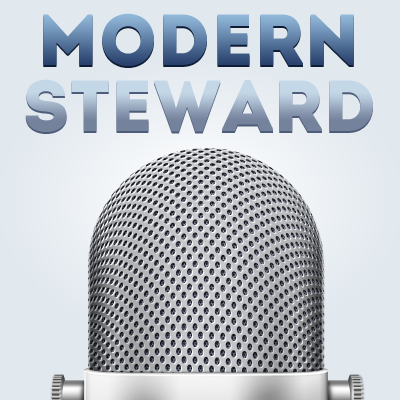
<style>
.page{position:relative;width:400px;height:400px;background:#e1e8ee}
.page>*{position:absolute;margin:0}
.t1{font:72px "Intro"}
</style>
<div class="page">
<p class="t1" style="left:43px;top:15px;width:311px;height:53px">Modern</p>
<p class="t1" style="left:43px;top:13px;width:311px;height:53px">Modern</p>
<p class="t1" style="left:25px;top:81px;width:348px;height:53px">Steward</p>
<p class="t1" style="left:25px;top:79px;width:348px;height:53px">Steward</p>
</div>
